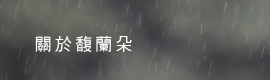
<style>
.page{position:relative;width:270px;height:80px}
.page>*{position:absolute;margin:0}
.t1{font:16.8px "DFHei-W5-WIN-BF";letter-spacing:0.2em;color:#fefefe}
</style>
<div class="page">
<p class="t1" style="left:35px;top:35px;width:97px;height:17px">關於馥蘭朵</p>
</div>
